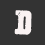
<style>
.page{position:relative;width:45px;height:45px;background:#333333}
.page>*{position:absolute;margin:0}
.t1{font:24px "SecretAgency";color:#f9f2f2}
</style>
<div class="page">
<p class="t1" style="left:14px;top:10px;width:18px;height:25px">D</p>
</div>
